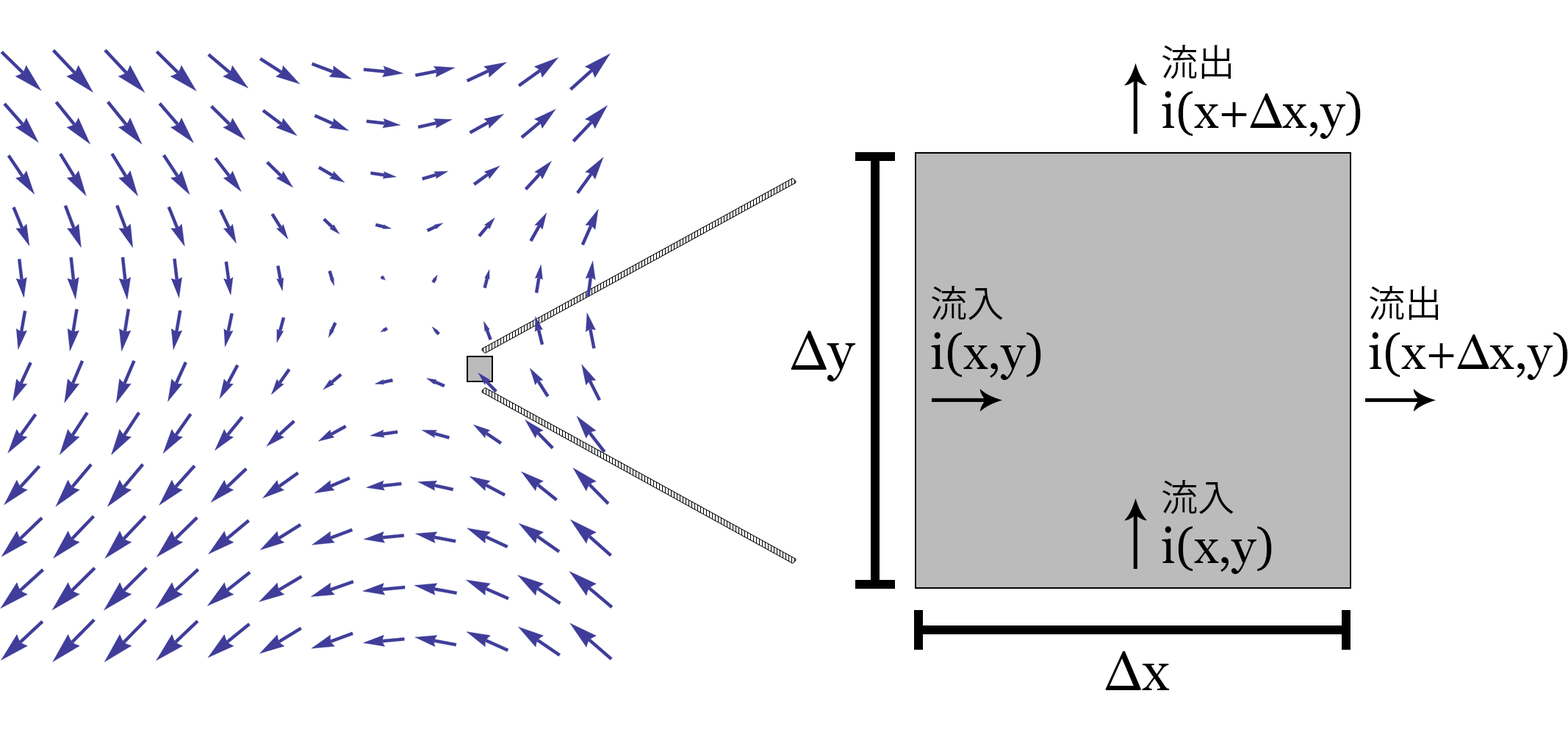
<style>
.page{position:relative;width:1568px;height:735px;background:#ffffff}
.page>*{position:absolute;margin:0}
.t1{font:49px/42.9px "Georgia";color:#000000}
.t2{font:36.7px/42.9px "KozGoPr6N-Regular";color:#000000}
.t3{font:55.1px "Georgia";color:#000000}
</style>
<div class="page">
<p class="t1" style="left:1162px;top:45px;width:199px;height:94px"><span class="t2">流出<br></span>i(x+Δx,y)</p>
<p class="t1" style="left:931px;top:286px;width:110px;height:94px"><span class="t2">流入<br></span>i(x,y)</p>
<p class="t1" style="left:1369px;top:286px;width:199px;height:94px"><span class="t2">流出<br></span>i(x+Δx,y)</p>
<p class="t3" style="left:791px;top:331px;width:64px;height:50px">Δy</p>
<p class="t1" style="left:1162px;top:480px;width:110px;height:94px"><span class="t2">流入<br></span>i(x,y)</p>
<p class="t3" style="left:1105px;top:651px;width:65px;height:39px">Δx</p>
</div>
